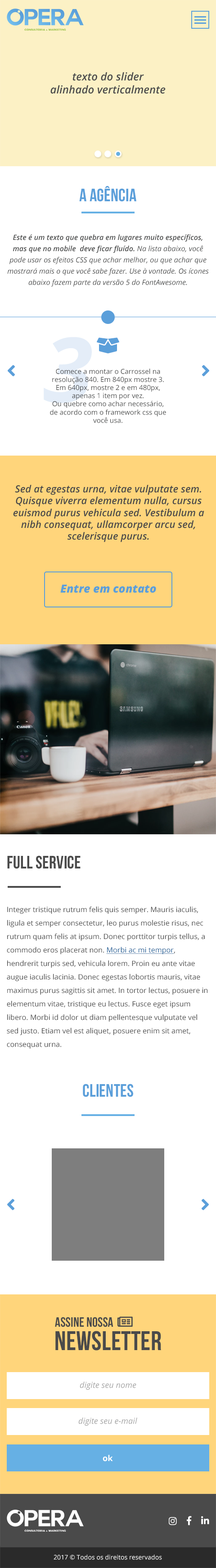
<style>
.page{position:relative;width:216px;height:1568px;background:#ffffff}
.page>*{position:absolute;margin:0}
.t1{font:10.8px "OpenSans-SemiboldItalic";letter-spacing:0.005em;color:#4a4b4b}
.t2{font:18px "BebasNeue";letter-spacing:0.005em;color:#5b9fda}
.t3{font:7.2px/11.2px "OpenSans-Italic";letter-spacing:0.005em;color:#4a4b4b}
.t4{font:7.2px/11.2px "OpenSans-SemiboldItalic";letter-spacing:0.005em;color:#4a4b4b}
.t5{font:89.9px "OpenSans-BoldItalic";letter-spacing:0.005em;color:#e4edf8}
.t6{font:6.8px "OpenSans";letter-spacing:0.005em;color:#4a4b4b}
.t7{font:9.9px "OpenSans-SemiboldItalic";letter-spacing:0.005em;color:#4a4a4a}
.t8{font:11.2px "OpenSans-ExtraboldItalic";color:#5b9fda}
.t9{font:18px "BebasNeue";letter-spacing:0.005em;color:#4a4a4a}
.t10{font:7.2px/13.5px "OpenSans";letter-spacing:0.005em;color:#4a4a4a}
.t11{font:7.2px/13.5px "OpenSans";letter-spacing:0.005em;color:#246197;text-decoration:underline}
.t12{font:13.5px "BebasNeue";letter-spacing:0.005em;color:#4a4a4a}
.t13{font:27px "BebasNeue";letter-spacing:0.005em;color:#4a4a4a}
.t14{font:8.1px "OpenSans-Italic";letter-spacing:0.005em;color:#a5a5a5}
.t15{font:8.1px "OpenSans-Bold";letter-spacing:0.005em;color:#ffffff}
.t16{font:6.3px "OpenSans";letter-spacing:0.005em;color:#ffffff}
</style>
<div class="page">
<p class="t1" style="left:50px;top:72px;width:115px;height:22px;text-align:center">texto do slider<br>alinhado verticalmente</p>
<p class="t2" style="left:79px;top:186px;width:57px;height:16px">A agência</p>
<p class="t3" style="left:7px;top:234px;width:201px;height:53px;text-align:center"><span class="t4">Este é um texto que quebra em lugares muito específicos, mas que no mobile  deve ficar fluído. </span>Na lista abaixo, você pode usar os efeitos CSS que achar melhor, ou que achar que mostrará mais o que você sabe fazer. Use à vontade. Os ícones abaixo fazem parte da versão 5 do FontAwesome.</p>
<p class="t5" style="left:44px;top:337px;width:48px;height:66px">3</p>
<p class="t6" style="left:50px;top:368px;width:116px;height:55px;text-align:center">Comece a montar o Carrossel na resolução 840. Em 840px mostre 3. Em 640px, mostre 2 e em 480px, apenas 1 item por vez.<br>Ou quebre como achar necessário, de acordo com o framework css que você usa.</p>
<p class="t7" style="left:13px;top:485px;width:191px;height:57px;text-align:center">Sed at egestas urna, vitae vulputate sem. Quisque viverra elementum nulla, cursus euismod purus vehicula sed. Vestibulum a nibh consequat, ullamcorper arcu sed, scelerisque purus.</p>
<p class="t8" style="left:60px;top:585px;width:96px;height:8px">Entre em contato</p>
<p class="t9" style="left:7px;top:855px;width:73px;height:14px">full service</p>
<p class="t10" style="left:7px;top:906px;width:200px;height:143px">Integer tristique rutrum felis quis semper. Mauris iaculis, ligula et semper consectetur, leo purus molestie risus, nec rutrum quam felis at ipsum. Donec porttitor turpis tellus, a commodo eros placerat non. <span class="t11">Morbi ac mi tempor</span>, hendrerit turpis sed, vehicula lorem. Proin eu ante vitae augue iaculis lacinia. Donec egestas lobortis mauris, vitae maximus purus sagittis sit amet. In tortor lectus, posuere in elementum vitae, tristique eu lectus. Fusce eget ipsum libero. Morbi id dolor ut diam pellentesque vulputate vel sed justo. Etiam vel est aliquet, posuere enim sit amet, consequat urna.</p>
<p class="t2" style="left:83px;top:1084px;width:50px;height:13px">Clientes</p>
<p class="t12" style="left:55px;top:1317px;width:58px;height:10px">assine nossa</p>
<p class="t13" style="left:55px;top:1331px;width:106px;height:20px">Newsletter</p>
<p class="t14" style="left:80px;top:1382px;width:56px;height:8px">digite seu nome</p>
<p class="t14" style="left:78px;top:1417px;width:59px;height:9px">digite seu e-mail</p>
<p class="t15" style="left:102px;top:1455px;width:11px;height:7px">ok</p>
<p class="t16" style="left:53px;top:1555px;width:109px;height:5px">2017 © Todos os direitos reservados</p>
</div>
